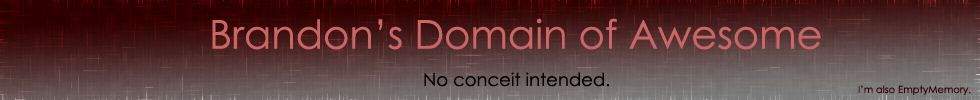
<style>
.page{position:relative;width:980px;height:100px}
.page>*{position:absolute;margin:0}
.t1{font:40px "CenturyGothic";color:#cc6666}
.t2{font:18px "CenturyGothic";color:#000000}
.t3{font:10px "CenturyGothic";color:#330000}
</style>
<div class="page">
<p class="t1" style="left:212px;top:18px;width:609px;height:32px">Brandon’s Domain of Awesome</p>
<p class="t2" style="left:424px;top:72px;width:186px;height:15px">No conceit intended.</p>
<p class="t3" style="left:858px;top:85px;width:113px;height:10px">I’m also EmptyMemory.</p>
</div>
